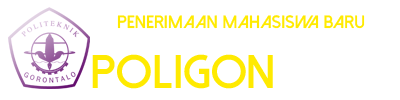
<style>
.page{position:relative;width:400px;height:100px;background:#ffffff}
.page>*{position:absolute;margin:0}
.t1{font:18px "DolceVitaHeavy-Bold";color:#ffea00}
.t2{font:47.3px "DolceVitaHeavy-Bold";color:#ffea00}
</style>
<div class="page">
<p class="t1" style="left:117px;top:15px;width:248px;height:14px">Penerimaan Mahasiswa Baru</p>
<p class="t2" style="left:92px;top:54px;width:181px;height:35px">Poligon</p>
</div>
